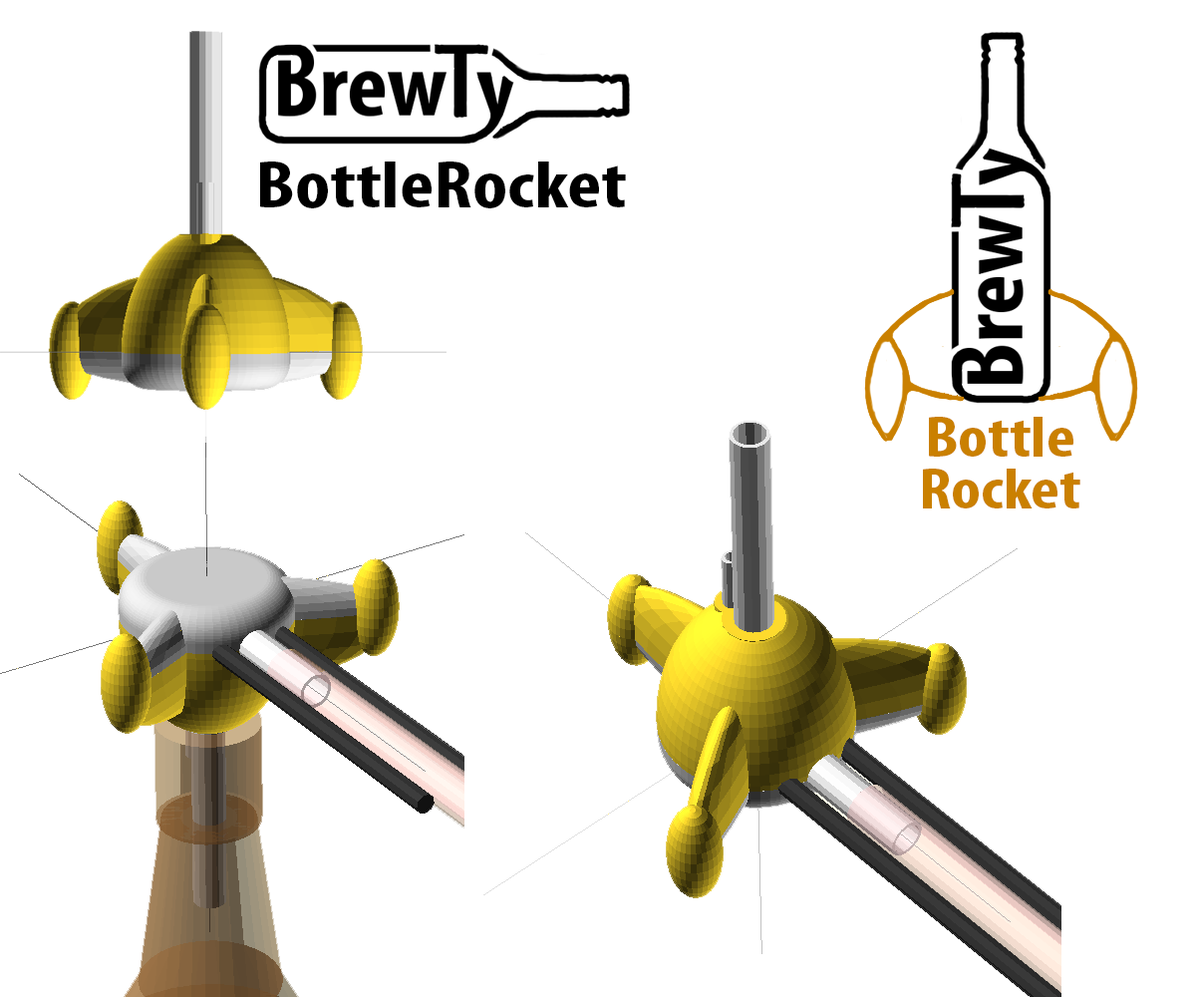
<style>
.page{position:relative;width:1196px;height:997px;background:#ffffff}
.page>*{position:absolute;margin:0}
.t1{font:67.9px "MyriadPro-BoldCond";color:#000000;scale:1.21 1}
.t2{font:57.5px/51.8px "MyriadPro-BoldCond";color:#ca8000;scale:1.2 1}
</style>
<div class="page">
<p class="t1" style="left:260px;top:161px;width:366px;height:47px">BottleRocket</p>
<p class="t2" style="left:923px;top:417px;width:158px;height:91px;text-align:center">Bottle<br>Rocket</p>
</div>
